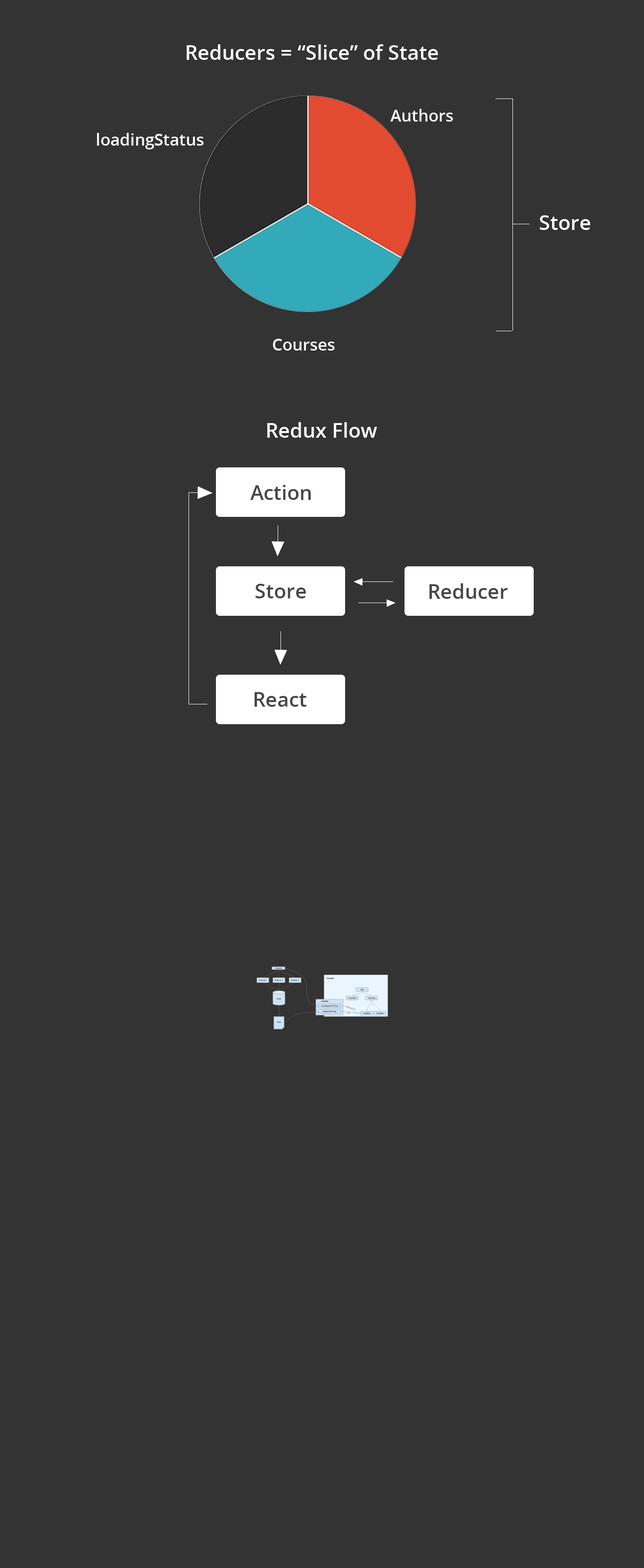
<style>
.page{position:relative;width:644px;height:1568px;background:#333333}
.page>*{position:absolute;margin:0}
.t1{font:20.3px "OpenSans-Semibold";color:#ffffff}
.t2{font:16.5px "OpenSans-Semibold";color:#ffffff}
.t3{font:20.3px "OpenSans-Semibold";color:#464646}
</style>
<div class="page">
<p class="t1" style="left:187px;top:44px;width:251px;height:16px">Reducers = “Slice” of State</p>
<p class="t2" style="left:390px;top:109px;width:63px;height:13px">Authors</p>
<p class="t2" style="left:97px;top:133px;width:107px;height:16px">loadingStatus</p>
<p class="t1" style="left:539px;top:215px;width:51px;height:15px">Store</p>
<p class="t2" style="left:273px;top:339px;width:62px;height:12px">Courses</p>
<p class="t1" style="left:267px;top:422px;width:110px;height:16px">Redux Flow</p>
<p class="t3" style="left:250px;top:485px;width:60px;height:15px">Action</p>
<p class="t3" style="left:255px;top:584px;width:51px;height:14px">Store</p>
<p class="t3" style="left:429px;top:583px;width:78px;height:16px">Reducer</p>
<p class="t3" style="left:254px;top:692px;width:52px;height:15px">React</p>
</div>
